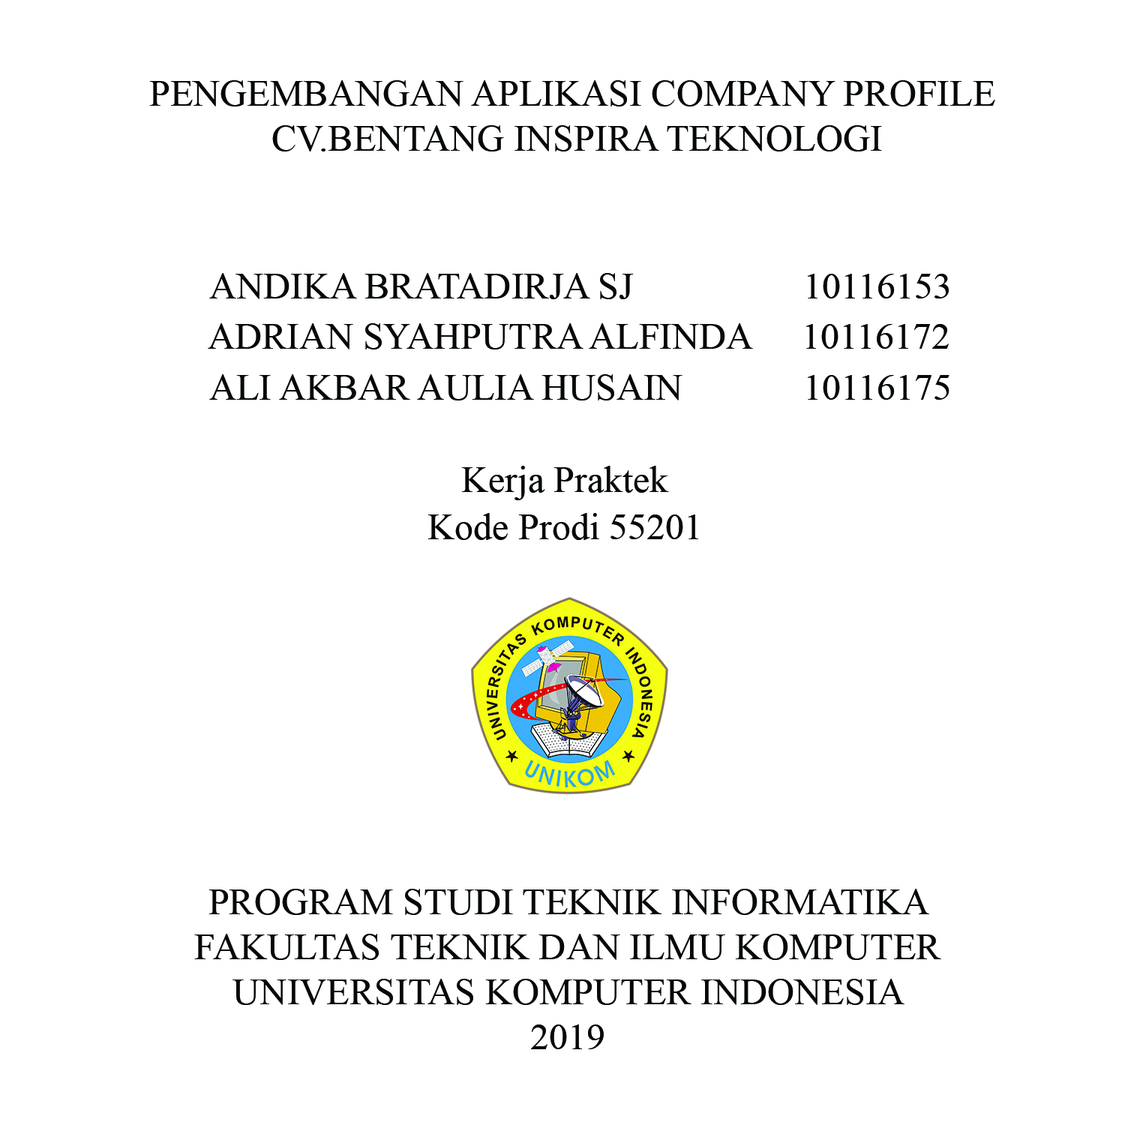
<style>
.page{position:relative;width:1134px;height:1134px;background:#ffffff}
.page>*{position:absolute;margin:0}
.t1{font:37.5px "TimesNewRomanPSMT";color:#060808}
.t2{font:9px "TimesNewRomanPSMT";color:#060808}
</style>
<div class="page">
<p class="t1" style="left:149px;top:80px;width:846px;height:72px;text-align:center">PENGEMBANGAN APLIKASI COMPANY PROFILE<br> CV.BENTANG INSPIRA TEKNOLOGI</p>
<p class="t2" style="left:209px;top:273px;width:740px;height:26px;text-align:center">ANDIKA BRATADIRJA SJ       10116153</p>
<p class="t2" style="left:208px;top:323px;width:741px;height:27px;text-align:center">ADRIAN SYAHPUTRA ALFINDA  10116172</p>
<p class="t2" style="left:209px;top:374px;width:741px;height:26px;text-align:center">ALI AKBAR AULIA HUSAIN      10116175</p>
<p class="t2" style="left:461px;top:466px;width:208px;height:34px;text-align:center">Kerja Praktek</p>
<p class="t2" style="left:428px;top:513px;width:270px;height:27px;text-align:center">Kode Prodi 55201</p>
<p class="t1" style="left:194px;top:889px;width:747px;height:160px;text-align:center">PROGRAM STUDI TEKNIK INFORMATIKA<br>FAKULTAS TEKNIK DAN ILMU KOMPUTER<br>UNIVERSITAS KOMPUTER INDONESIA<br>2019</p>
</div>
